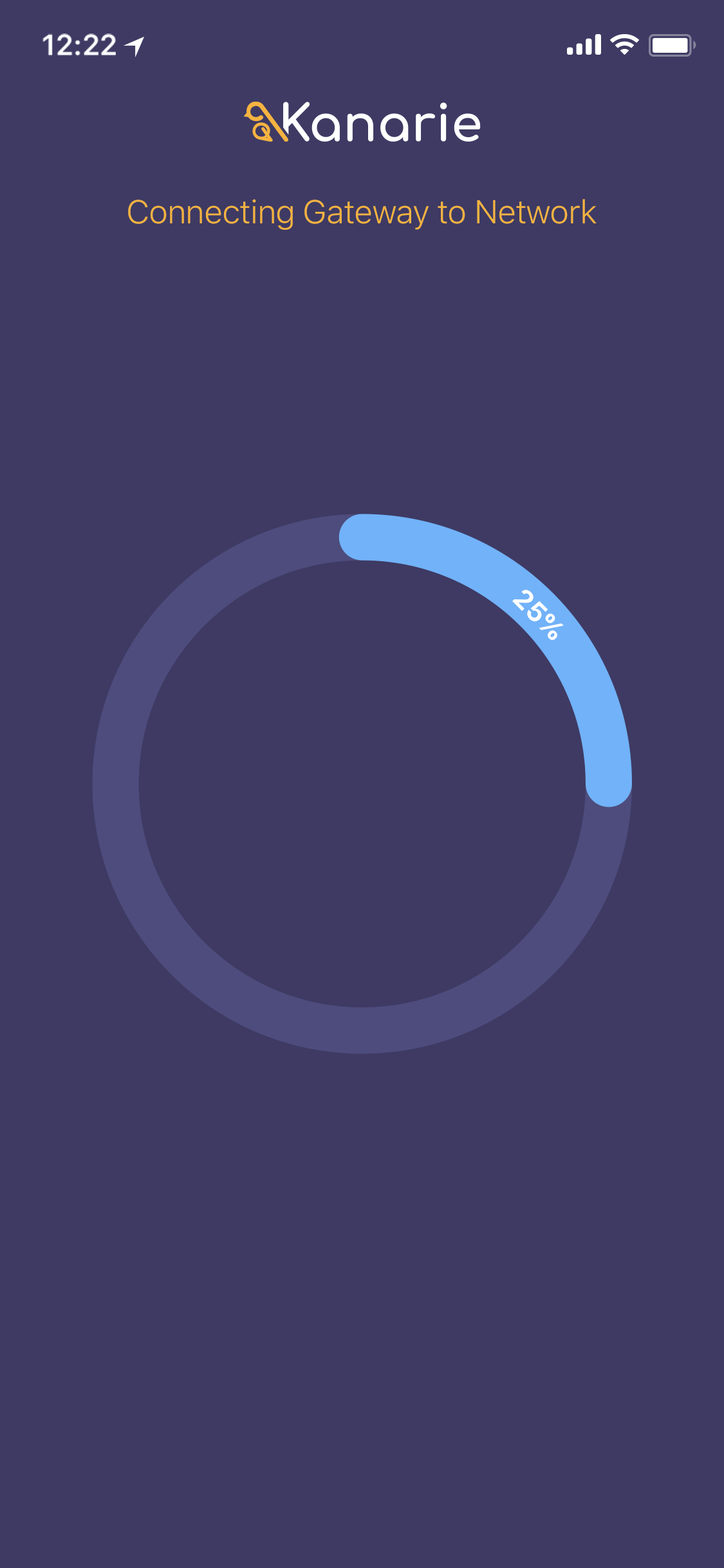
<style>
.page{position:relative;width:724px;height:1568px;background:#3e3a63}
.page>*{position:absolute;margin:0}
.t1{font:29px "SFProText-Semibold";letter-spacing:-0.02em;color:#ffffff}
.t2{font:32.8px "SFProText-Light";letter-spacing:-0.024em;color:#f3b341}
.t3{font:27px "SFProText-Bold";color:#ffffff}
</style>
<div class="page">
<p class="t1" style="left:42px;top:33px;width:74px;height:23px">12:22</p>
<p class="t2" style="left:128px;top:199px;width:469px;height:31px">Connecting Gateway to Network</p>
<p class="t3" style="left:512px;top:590px;width:52px;height:50px;rotate:45deg">25%</p>
</div>
